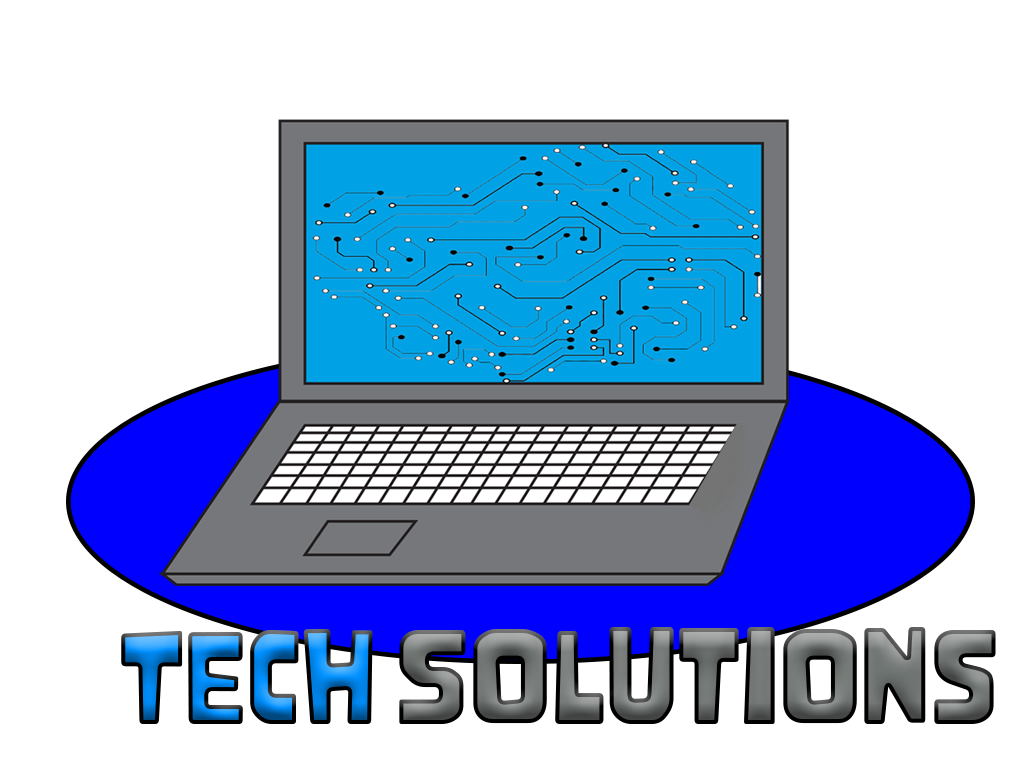
<style>
.page{position:relative;width:1035px;height:781px;background:#ffffff}
.page>*{position:absolute;margin:0}
.t1{font:116.7px "Nove"}
.t2{font:120.8px "Nove"}
</style>
<div class="page">
<p class="t1" style="left:121px;top:629px;width:252px;height:95px">TEch</p>
<p class="t2" style="left:399px;top:627px;width:597px;height:97px">Solutions</p>
</div>
